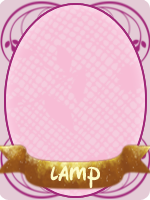
<style>
.page{position:relative;width:150px;height:200px}
.page>*{position:absolute;margin:0}
.t1{font:37.4px "Waltograph";color:#fcfac7}
</style>
<div class="page">
<p class="t1" style="left:50px;top:165px;width:50px;height:23px">lamp</p>
</div>
